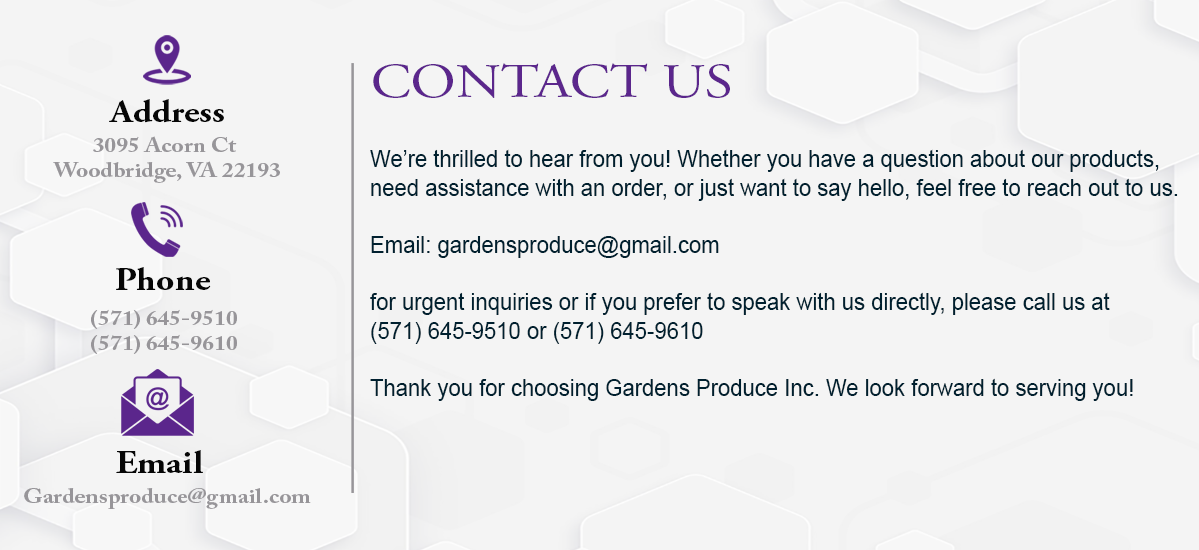
<style>
.page{position:relative;width:1199px;height:550px;background:#f4f4f4}
.page>*{position:absolute;margin:0}
.t1{font:48.6px "AGaramondPro-Regular";color:#5b268c;scale:1.18 1}
.t2{font:32.7px "AGaramondPro-Bold";color:#060606;scale:1.1 1}
.t3{font:20.7px "ACaslonPro-Bold";color:#979599;scale:1.13 1}
.t4{font:23.8px "ArialMT";color:#00202f;scale:0.93 1}
</style>
<div class="page">
<p class="t1" style="left:373px;top:63px;width:357px;height:35px">CONTACT US</p>
<p class="t2" style="left:109px;top:99px;width:115px;height:24px">Address</p>
<p class="t3" style="left:53px;top:136px;width:227px;height:47px;text-align:center">3095 Acorn Ct <br>Woodbridge, VA 22193</p>
<p class="t4" style="left:370px;top:149px;width:808px;height:252px">We’re thrilled to hear from you! Whether you have a question about our products,<br>need assistance with an order, or just want to say hello, feel free to reach out to us.<br><br>Email: gardensproduce@gmail.com<br><br>for urgent inquiries or if you prefer to speak with us directly, please call us at<br>(571) 645-9510 or (571) 645-9610<br><br>Thank you for choosing Gardens Produce Inc. We look forward to serving you!</p>
<p class="t2" style="left:116px;top:267px;width:95px;height:23px">Phone</p>
<p class="t3" style="left:91px;top:309px;width:146px;height:45px;text-align:center">(571) 645-9510<br>(571) 645-9610</p>
<p class="t2" style="left:116px;top:450px;width:87px;height:23px">Email</p>
<p class="t3" style="left:24px;top:488px;width:287px;height:21px">Gardensproduce@gmail.com</p>
</div>
